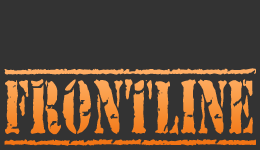
<style>
.page{position:relative;width:260px;height:150px;background:#333333}
.page>*{position:absolute;margin:0}
.t1{font:77.1px "OldStamper";scale:0.58 1}
</style>
<div class="page">
<p class="t1" style="left:4px;top:68px;width:252px;height:78px">FRONTLINE</p>
</div>
